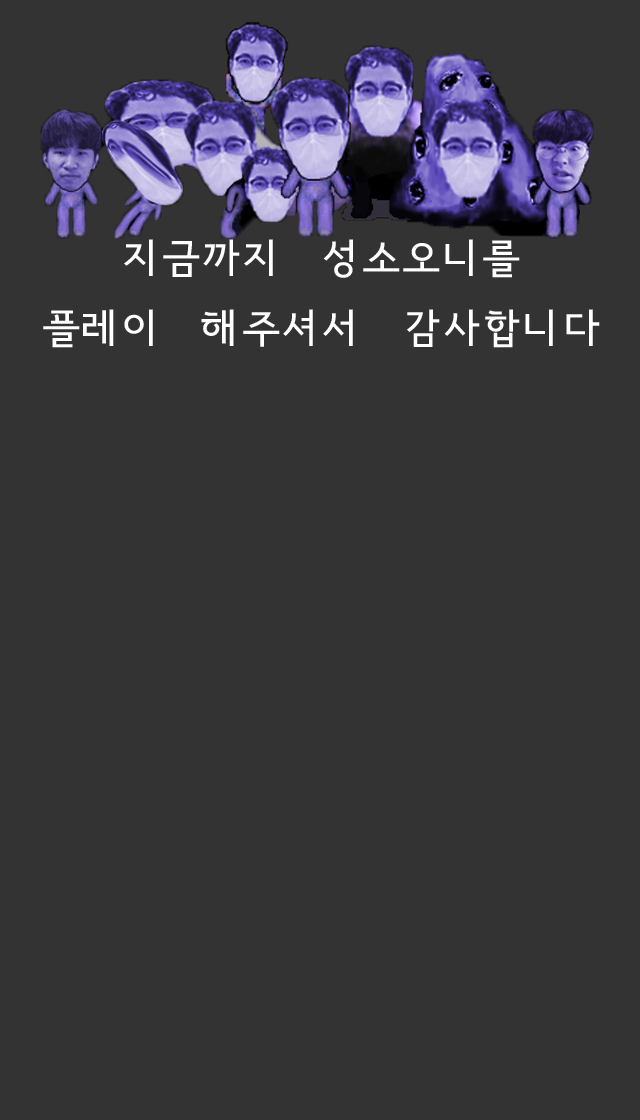
<style>
.page{position:relative;width:640px;height:1120px;background:#333333}
.page>*{position:absolute;margin:0}
.t1{font:40px "SeoulNamsanvert";color:#ffffff}
</style>
<div class="page">
<p class="t1" style="left:43px;top:239px;width:557px;height:109px;text-align:center">지금까지 성소오니를<br>플레이 해주셔서 감사합니다</p>
</div>
